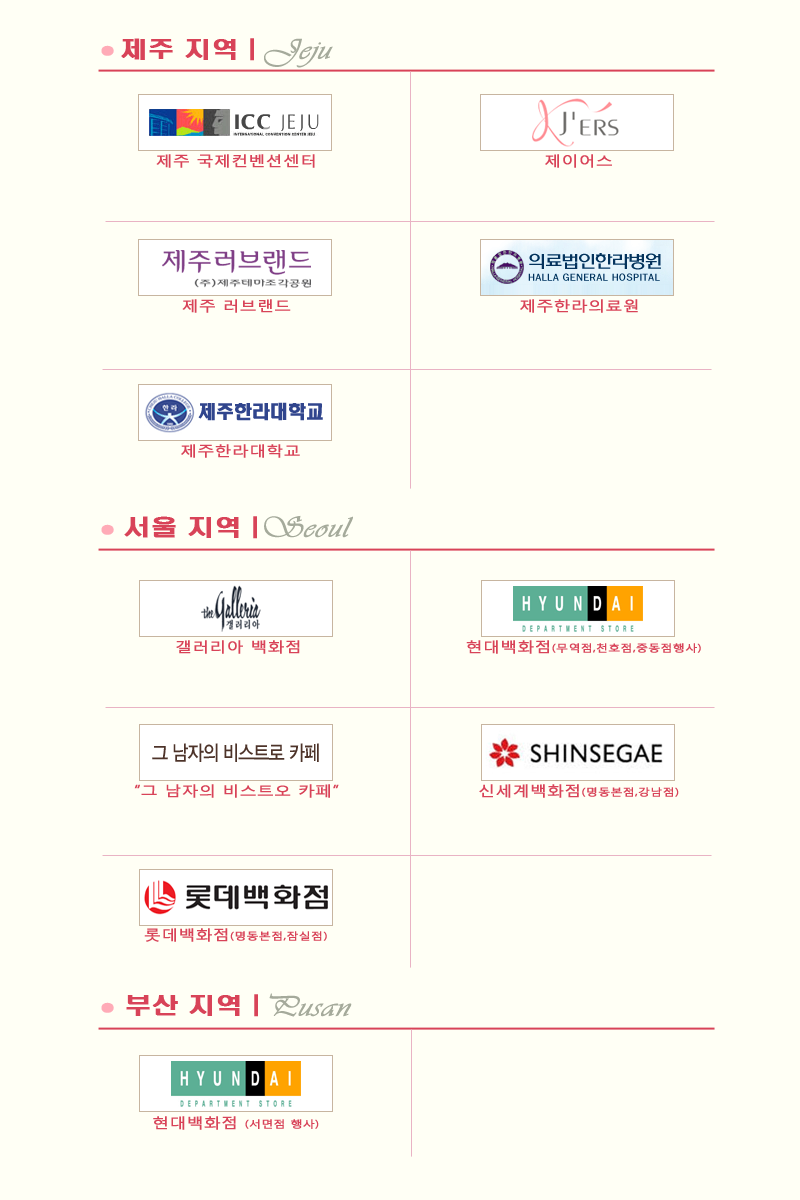
<style>
.page{position:relative;width:800px;height:1200px;background:#fffff5}
.page>*{position:absolute;margin:0}
.t1{font:22px "H2hdrM";color:#d84358;font-weight:bold;scale:1.2 1}
.t2{font:30px "Vivaldii";color:#a5aa9b;font-weight:bold;scale:1.2 1}
.t3{font:12px "H2hdrM";color:#ffabb7;font-weight:bold;scale:1.2 1}
.t4{font:14px "MalgunGothicRegular";color:#d84358;font-weight:bold;scale:1.2 1}
.t5{font:10px "MalgunGothicRegular";color:#d84358;font-weight:bold;scale:1.2 1}
</style>
<div class="page">
<p class="t1" style="left:121px;top:38px;width:133px;height:23px">제주 지역 |</p>
<p class="t2" style="left:264px;top:38px;width:69px;height:30px">Jeju</p>
<p class="t3" style="left:101px;top:45px;width:13px;height:11px">●</p>
<p class="t4" style="left:156px;top:154px;width:159px;height:14px">제주 국제컨벤션센터</p>
<p class="t4" style="left:545px;top:154px;width:67px;height:14px">제이어스</p>
<p class="t4" style="left:182px;top:299px;width:109px;height:14px">제주 러브랜드</p>
<p class="t4" style="left:520px;top:299px;width:118px;height:14px">제주한라의료원</p>
<p class="t4" style="left:181px;top:444px;width:119px;height:14px">제주한라대학교</p>
<p class="t1" style="left:124px;top:516px;width:133px;height:23px">서울 지역 |</p>
<p class="t2" style="left:264px;top:515px;width:89px;height:23px">Seoul</p>
<p class="t3" style="left:101px;top:524px;width:13px;height:11px">●</p>
<p class="t4" style="left:176px;top:640px;width:124px;height:14px">갤러리아 백화점</p>
<p class="t5" style="left:466px;top:640px;width:235px;height:14px"><span class="t4">현대백화점</span>(무역점,천호점,중동점행사)</p>
<p class="t4" style="left:134px;top:784px;width:205px;height:14px">“그 남자의 비스트오 카페”</p>
<p class="t5" style="left:479px;top:784px;width:200px;height:14px"><span class="t4">신세계백화점</span>(명동본점,강남점)</p>
<p class="t5" style="left:144px;top:928px;width:183px;height:14px"><span class="t4">롯데백화점</span>(명동본점,잠실점)</p>
<p class="t1" style="left:126px;top:994px;width:132px;height:23px">부산 지역 |</p>
<p class="t2" style="left:269px;top:993px;width:83px;height:24px">Pusan</p>
<p class="t3" style="left:101px;top:1002px;width:13px;height:11px">●</p>
<p class="t5" style="left:153px;top:1116px;width:166px;height:14px"><span class="t4">현대백화점 </span>(서면점 행사)</p>
</div>
